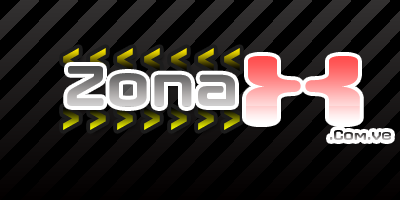
<style>
.page{position:relative;width:400px;height:200px;background:#000000}
.page>*{position:absolute;margin:0}
.t1{font:36px "ErasITC-Bold"}
.t2{font:97px "AxaxaxRg-Bold";scale:1.94 1}
.t3{font:14px "AxaxaxRg-Bold"}
</style>
<div class="page">
<p class="t1" style="left:63px;top:48px;width:177px;height:23px">&lt; &lt; &lt; &lt; &lt; &lt; &lt;</p>
<p class="t2" style="left:246px;top:56px;width:114px;height:67px">X</p>
<p class="t1" style="left:63px;top:107px;width:177px;height:23px">&gt; &gt; &gt; &gt; &gt; &gt; &gt;</p>
<p class="t3" style="left:330px;top:130px;width:61px;height:10px">.Com.ve</p>
</div>
